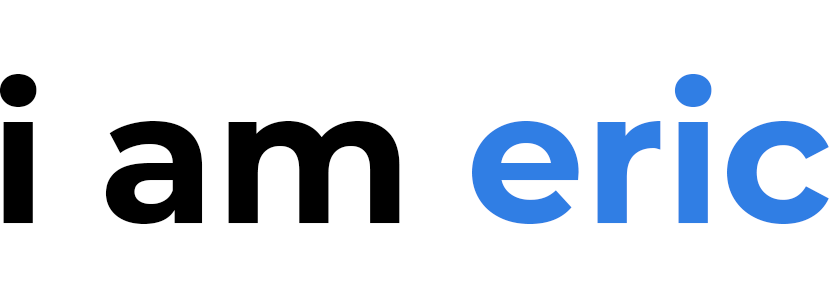
<style>
.page{position:relative;width:829px;height:302px;background:#ffffff}
.page>*{position:absolute;margin:0}
.t1{font:188px "Montserrat-Bold";color:#000000}
.t2{font:188px "Montserrat-Bold";color:#307ee4}
</style>
<div class="page">
<p class="t1" style="left:0px;top:74px;width:829px;height:150px">i am <span class="t2">eric</span></p>
</div>
